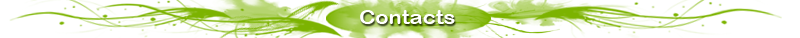
<style>
.page{position:relative;width:800px;height:38px;background:#ffffff}
.page>*{position:absolute;margin:0}
.t1{font:20px "ArialRoundedMTBold";color:#ffffff;scale:1.1 1}
</style>
<div class="page">
<p class="t1" style="left:360px;top:10px;width:95px;height:14px">Contacts</p>
</div>
